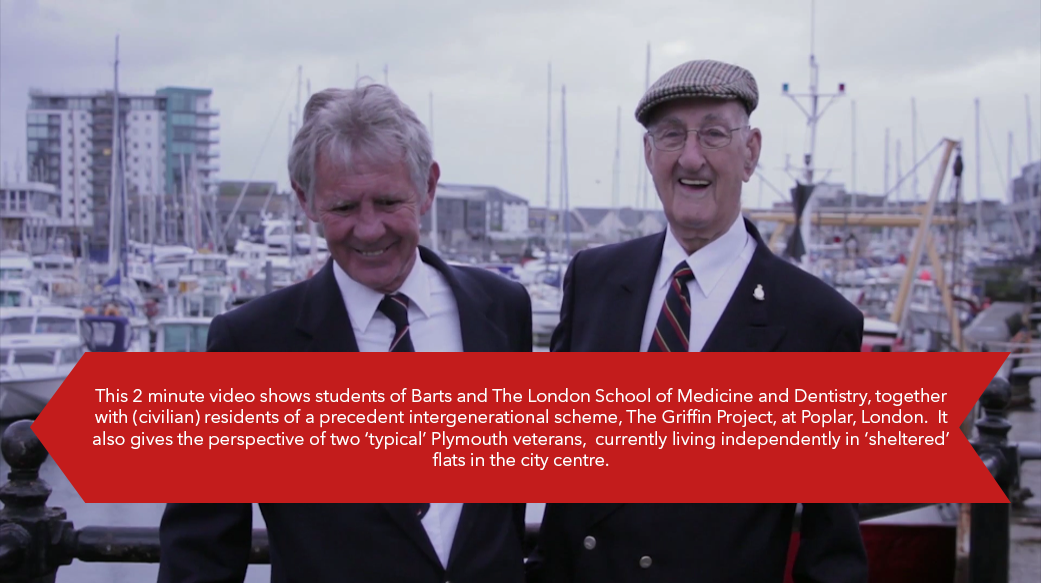
<style>
.page{position:relative;width:1041px;height:583px;background:#c31c1c}
.page>*{position:absolute;margin:0}
.t1{font:18px "AvenirNextLTPro-Regular";color:#ffffff}
</style>
<div class="page">
<p class="t1" style="left:93px;top:388px;width:856px;height:82px;text-align:center">This 2 minute video shows students of Barts and The London School of Medicine and Dentistry, together with (civilian) residents of a precedent intergenerational scheme, The Griffin Project, at Poplar, London.  It also gives the perspective of two ‘typical’ Plymouth veterans,  currently living independently in ‘sheltered’ flats in the city centre.</p>
</div>
